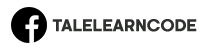
<style>
.page{position:relative;width:205px;height:52px;background:#ffffff}
.page>*{position:absolute;margin:0}
.t1{font:15.8px "Kamerik205-Regular3";color:#2f322e;text-transform:uppercase;font-weight:bold}
</style>
<div class="page">
<p class="t1" style="left:52px;top:19px;width:145px;height:13px">TaleLearnCode</p>
</div>
